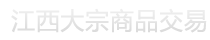
<style>
.page{position:relative;width:210px;height:40px;background:#ffffff}
.page>*{position:absolute;margin:0}
.t1{font:24px "MicrosoftYaHei";letter-spacing:0.03em;color:#e4e4e4;text-transform:uppercase}
</style>
<div class="page">
<p class="t1" style="left:11px;top:8px;width:196px;height:25px">江西大宗商品交易</p>
</div>
